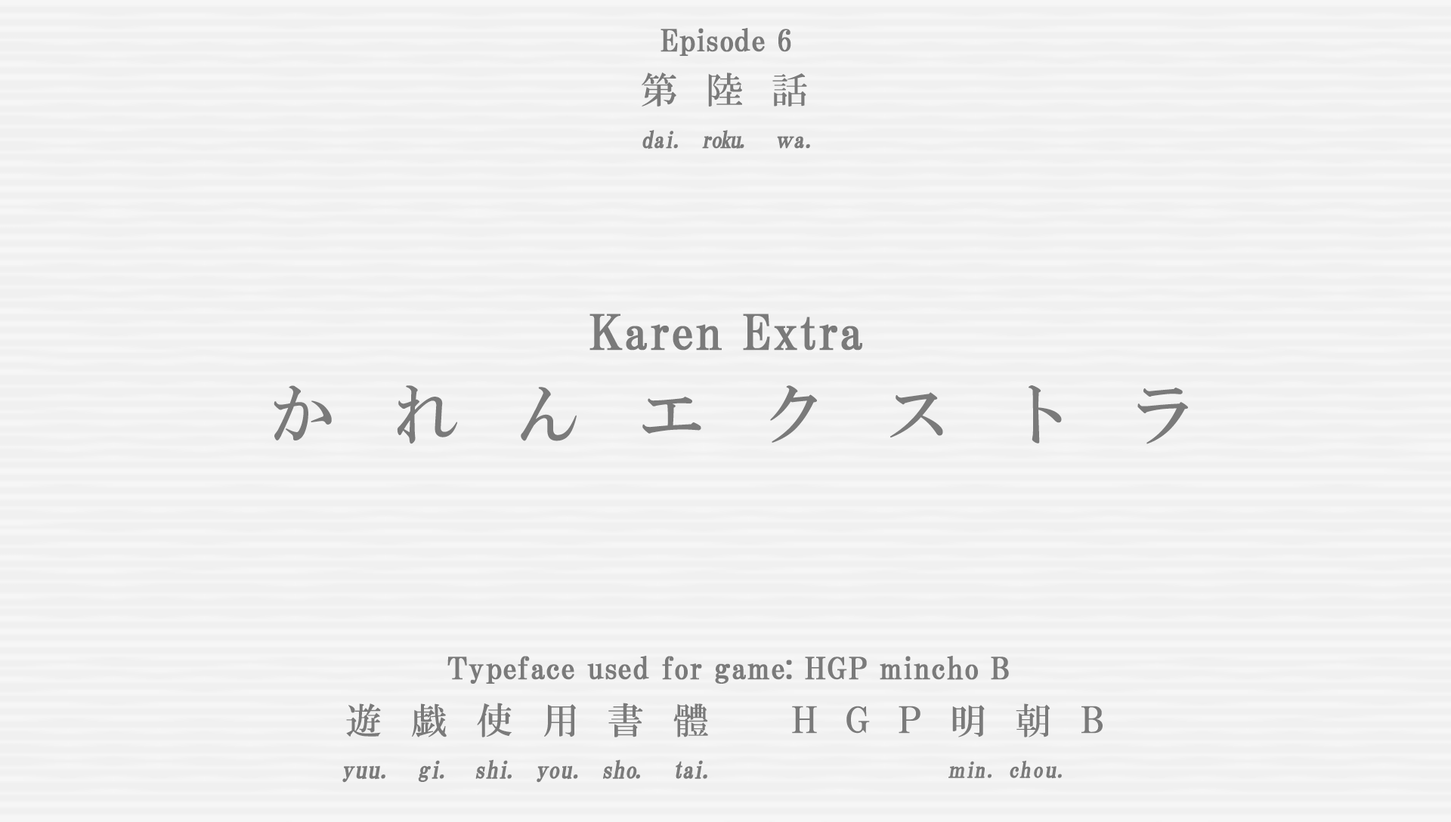
<style>
.page{position:relative;width:1451px;height:822px;background:#f0f0f0}
.page>*{position:absolute;margin:0}
.t1{font:30.2px "HGPMinchoB";letter-spacing:0.01em;color:#7a7a7a;font-weight:bold}
.t2{font:36.5px "HGMinchoB";letter-spacing:0.79em;color:#7a7a7a}
.t3{font:23.2px "HGMinchoB";letter-spacing:-0.1em;color:#7a7a7a;font-weight:bold;scale:0.96 1}
.t4{font:23.2px "HGMinchoB";color:#7a7a7a;font-weight:bold;scale:0.96 1}
.t5{font:23.2px "HGMinchoB";letter-spacing:-0.075em;color:#7a7a7a;font-weight:bold;scale:0.96 1}
.t6{font:23.2px "HGMinchoB";letter-spacing:0.07em;color:#7a7a7a;font-weight:bold;scale:0.96 1}
.t7{font:23.2px "HGMinchoB";letter-spacing:-0.05em;color:#7a7a7a;font-weight:bold;scale:0.86 1}
.t8{font:48.4px "HGPMinchoB";letter-spacing:0.01em;color:#7a7a7a;font-weight:bold}
.t9{font:65.7px "HGMinchoB";letter-spacing:0.87em;color:#7a7a7a}
.t10{font:36.3px "HGMinchoB";letter-spacing:0.81em;color:#7a7a7a}
.t11{font:36.3px "HGMinchoB";letter-spacing:0.8em;color:#7a7a7a}
.t12{font:36.3px "HGMinchoB";letter-spacing:0.79em;color:#7a7a7a}
.t13{font:36.3px "HGMinchoB";letter-spacing:0.71em;color:#7a7a7a;scale:0.85 1}
.t14{font:36.3px "HGMinchoB";letter-spacing:0.53em;color:#7a7a7a}
.t15{font:24.2px "HGMinchoB";color:#7a7a7a;font-weight:bold}
.t16{font:24.2px "HGMinchoB";letter-spacing:0.025em;color:#7a7a7a;font-weight:bold;scale:0.96 1}
.t17{font:24.2px "HGMinchoB";letter-spacing:0.075em;color:#7a7a7a;font-weight:bold;scale:0.96 1}
.t18{font:24.2px "HGMinchoB";letter-spacing:-0.025em;color:#7a7a7a;font-weight:bold;scale:0.96 1}
.t19{font:24.2px "HGMinchoB";letter-spacing:-0.11em;color:#7a7a7a;font-weight:bold;scale:0.96 1}
.t20{font:24.2px "HGMinchoB";color:#7a7a7a;font-weight:bold;scale:0.96 1}
.t21{font:24.2px "HGMinchoB";letter-spacing:-0.05em;color:#7a7a7a;font-weight:bold;scale:0.96 1}
.t22{font:24.2px "HGMinchoB";letter-spacing:-0.12em;color:#7a7a7a;font-weight:bold;scale:0.96 1}
.t23{font:24.2px "HGMinchoB";letter-spacing:-0.01em;color:#7a7a7a;font-weight:bold;scale:0.96 1}
.t24{font:24.2px "HGMinchoB";letter-spacing:0.005em;color:#7a7a7a;font-weight:bold;scale:0.96 1}
.t25{font:24.2px "HGMinchoB";letter-spacing:-0.09em;color:#7a7a7a;font-weight:bold;scale:0.96 1}
.t26{font:24.2px "HGMinchoB";letter-spacing:-0.075em;color:#7a7a7a;font-weight:bold;scale:0.96 1}
.t27{font:24.2px "HGMinchoB";letter-spacing:-0.1em;color:#7a7a7a;font-weight:bold;scale:0.96 1}
.t28{font:22px "HGMinchoB";letter-spacing:0.07em;color:#7a7a7a;font-weight:bold;scale:0.96 1}
.t29{font:22px "HGMinchoB";letter-spacing:-0.075em;color:#7a7a7a;font-weight:bold;scale:0.83 1}
.t30{font:22px "HGMinchoB";letter-spacing:-0.075em;color:#7a7a7a;font-weight:bold;scale:0.96 1}
.t31{font:22px "HGMinchoB";color:#7a7a7a;font-weight:bold;scale:0.96 1}
.t32{font:22px "HGMinchoB";letter-spacing:0.05em;color:#7a7a7a;font-weight:bold;scale:0.96 1}
.t33{font:22px "HGMinchoB";letter-spacing:0.01em;color:#7a7a7a;font-weight:bold;scale:1.06 1}
</style>
<div class="page">
<p class="t1" style="left:660px;top:28px;width:131px;height:28px">Episode 6</p>
<p class="t2" style="left:641px;top:73px;width:166px;height:34px">第陸話</p>
<p class="t3" style="left:642px;top:130px;width:168px;height:19px"><span class="t4">d</span><span class="t5">a</span>i<span class="t6">. </span>roku<span class="t6">.  </span><span class="t7">ｗ</span><span class="t4">a</span><span class="t6">.</span></p>
<p class="t8" style="left:589px;top:314px;width:273px;height:37px">Karen Extra</p>
<p class="t9" style="left:274px;top:385px;width:914px;height:59px">かれんエクストラ</p>
<p class="t1" style="left:447px;top:656px;width:562px;height:28px">Typeface used for game: HGP mincho B</p>
<p class="t10" style="left:346px;top:703px;width:362px;height:34px">遊<span class="t11">戯</span>使<span class="t12">用</span>書體</p>
<p class="t13" style="left:792px;top:706px;width:310px;height:28px">ＨＧＰ    Ｂ</p>
<p class="t12" style="left:952px;top:703px;width:97px;height:34px">明<span class="t14">朝</span></p>
<p class="t15" style="left:342px;top:759px;width:365px;height:24px"><span class="t16">y</span>uu<span class="t17">. </span><span class="t18">g</span><span class="t19">i</span><span class="t17">. </span><span class="t20">s</span><span class="t21">h</span><span class="t22">i</span><span class="t17">. </span><span class="t23">y</span><span class="t24">ou</span><span class="t17">. </span><span class="t18">s</span><span class="t20">h</span><span class="t25">o</span><span class="t17">.  </span><span class="t26">t</span><span class="t27">ai</span><span class="t17">.</span></p>
<p class="t28" style="left:948px;top:760px;width:114px;height:19px"><span class="t29">ｍ</span><span class="t30">i</span>n. <span class="t31">c</span>h<span class="t32">o</span><span class="t33">u</span>.</p>
</div>
